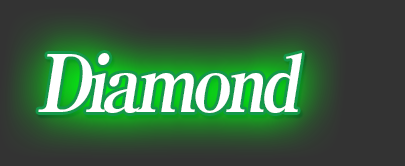
<style>
.page{position:relative;width:405px;height:166px;background:#333333}
.page>*{position:absolute;margin:0}
.t1{font:80px "RyuminPro-ExBold";letter-spacing:-0.08em;color:#ffffff;font-style:italic;scale:0.9 1}
</style>
<div class="page">
<p class="t1" style="left:38px;top:53px;width:264px;height:60px">Diamond</p>
</div>
